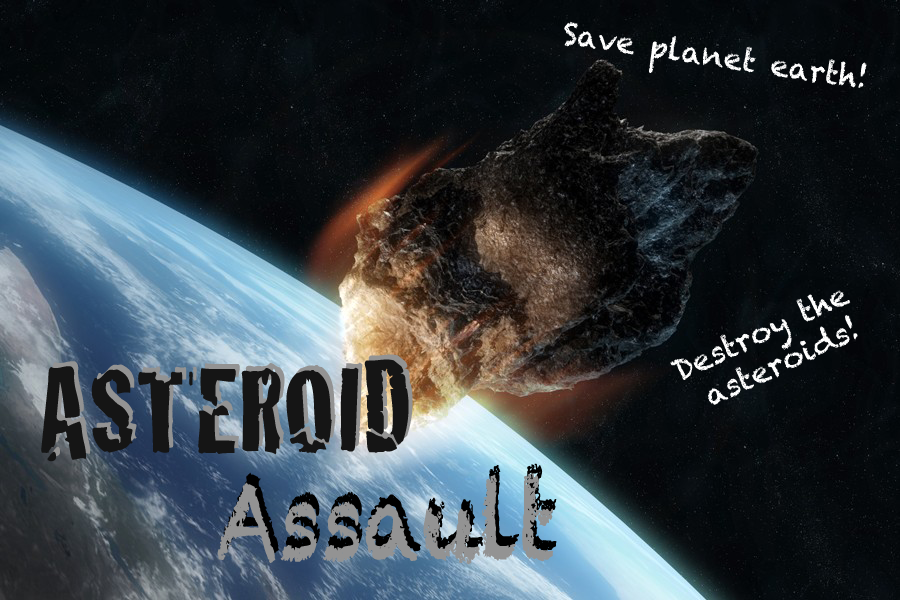
<style>
.page{position:relative;width:900px;height:600px}
.page>*{position:absolute;margin:0}
.t1{font:30px "Chalkduster";color:#ffffff}
.t2{font:125px "Cracked";color:#151515}
.t3{font:125px "Cracked"}
.t4{font:104.9px "Chalkduster";color:#939393;scale:0.8 1}
.t5{font:104.9px "Chalkduster";scale:0.8 1}
</style>
<div class="page">
<p class="t1" style="left:564px;top:21px;width:303px;height:67px;rotate:9deg">Save planet earth!</p>
<p class="t1" style="left:670px;top:290px;width:188px;height:115px;text-align:center;rotate:-25deg">Destroy the <br>asteroids!</p>
<p class="t2" style="left:41px;top:359px;width:368px;height:103px">ASTEROID</p>
<p class="t3" style="left:45px;top:354px;width:368px;height:103px">ASTEROID</p>
<p class="t4" style="left:217px;top:473px;width:337px;height:92px">Assault</p>
<p class="t5" style="left:221px;top:463px;width:336px;height:92px">Assault</p>
</div>
